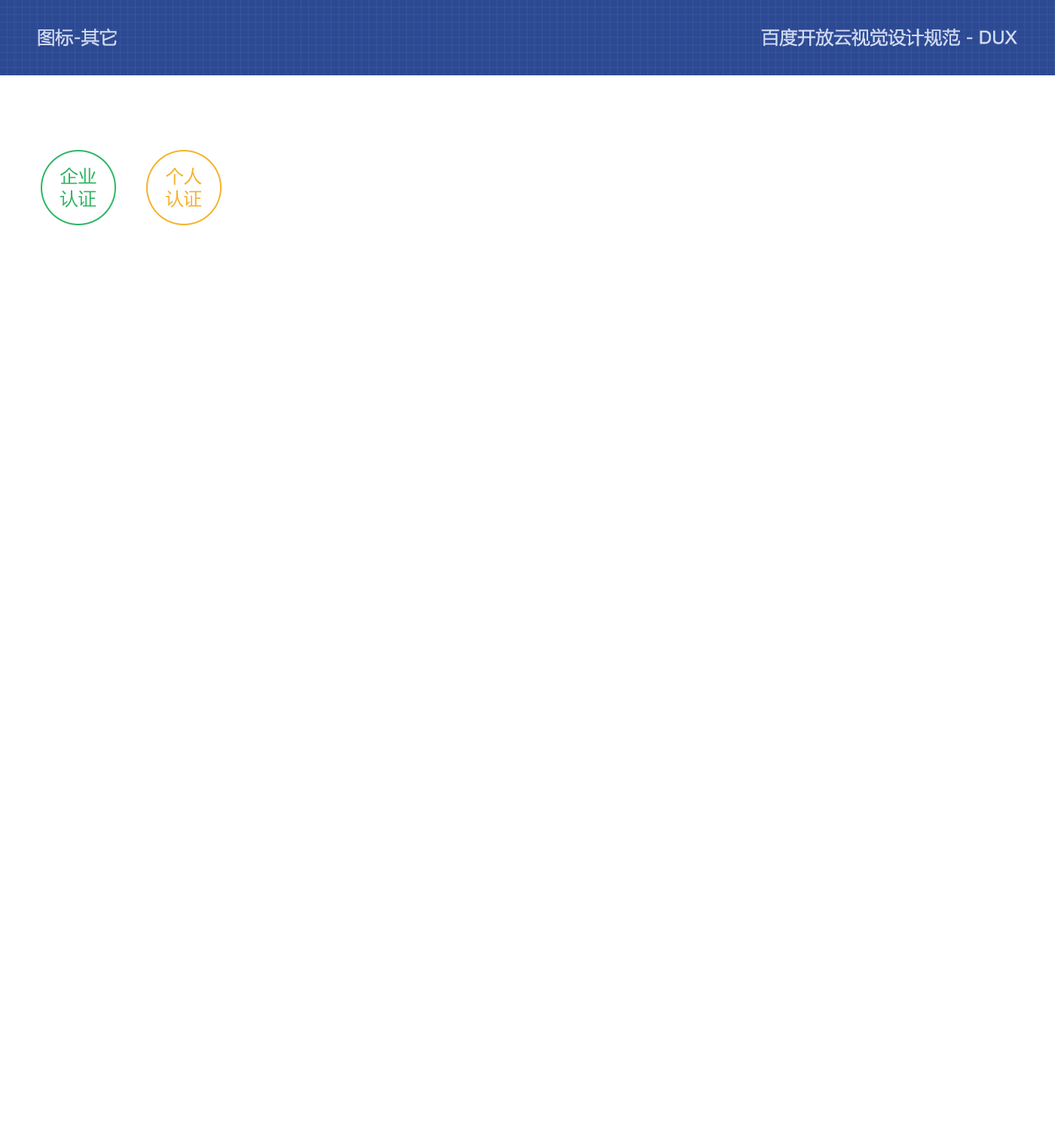
<style>
.page{position:relative;width:1055px;height:1130px;background:#ffffff}
.page>*{position:absolute;margin:0}
.t1{font:18.1px "MicrosoftYaHei";color:#d0daf3}
.t2{font:18.1px "ArialMT";color:#d0daf3}
.t3{font:18.1px/22.6px "MicrosoftYaHei";color:#2cb663}
.t4{font:18.1px/22.6px "MicrosoftYaHei";color:#f4b329}
</style>
<div class="page">
<p class="t1" style="left:38px;top:28px;width:79px;height:19px">图标-其它</p>
<p class="t1" style="left:761px;top:28px;width:256px;height:19px">百度开放云视觉设计规范 - <span class="t2">DUX</span></p>
<p class="t3" style="left:60px;top:167px;width:36px;height:41px">企业<br>认证</p>
<p class="t4" style="left:166px;top:167px;width:36px;height:41px">个人<br>认证</p>
</div>
